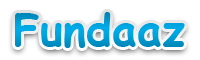
<style>
.page{position:relative;width:200px;height:60px;background:#ffffff}
.page>*{position:absolute;margin:0}
.t1{font:44.4px "ComicSansMS-Bold";color:#00a0d9}
</style>
<div class="page">
<p class="t1" style="left:15px;top:12px;width:170px;height:36px">Fundaaz</p>
</div>
